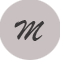
<style>
.page{position:relative;width:60px;height:60px;background:#c9c1c1}
.page>*{position:absolute;margin:0}
.t1{font:31.2px "BrushScriptMT";color:#3b3939}
</style>
<div class="page">
<p class="t1" style="left:14px;top:20px;width:31px;height:21px">M</p>
</div>
